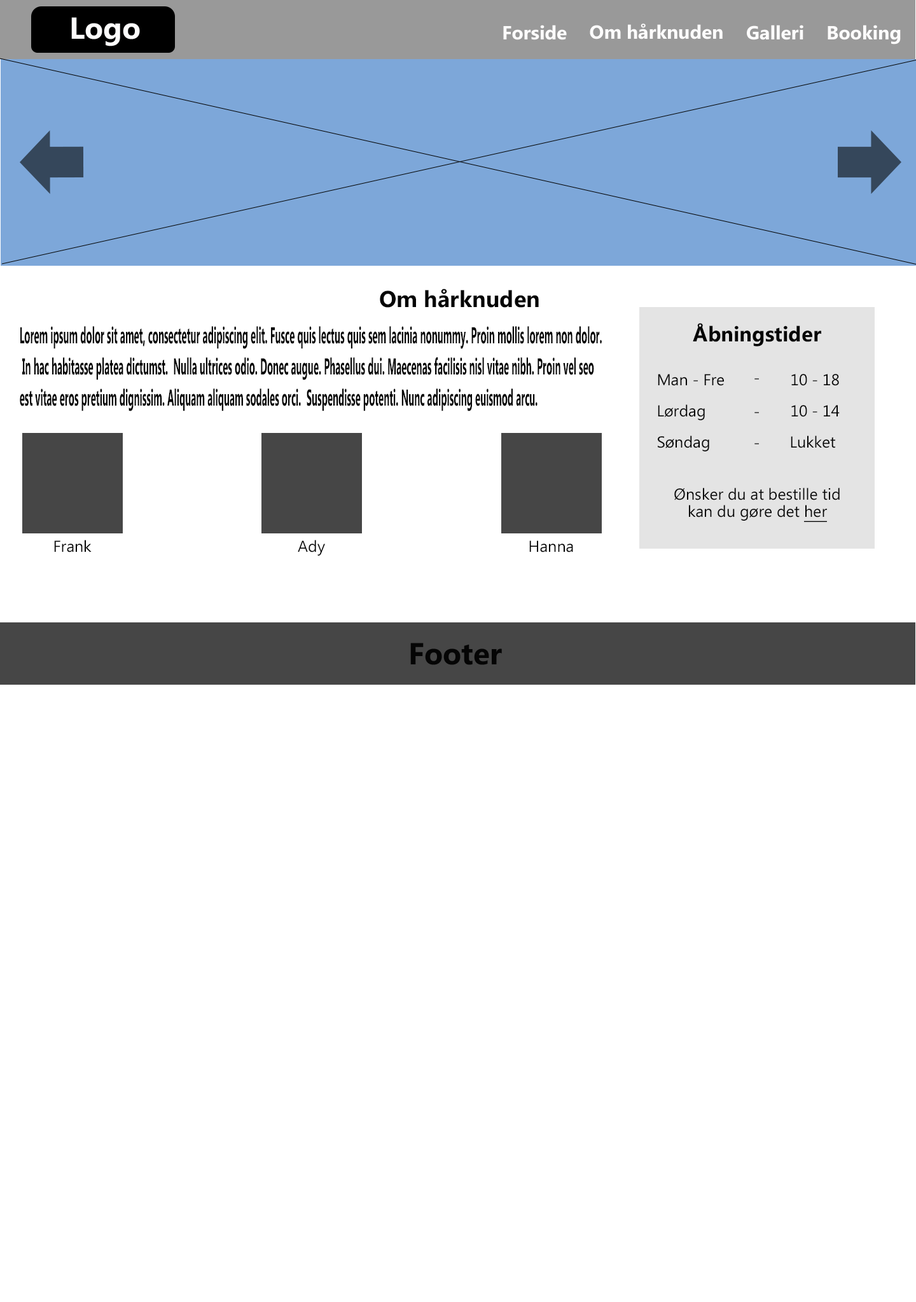
<style>
.page{position:relative;width:916px;height:1302px;background:#ffffff}
.page>*{position:absolute;margin:0}
.t1{font:30.5px "Ebrima-Bold";color:#fdfcfc}
.t2{font:19.1px "Ebrima-Bold";color:#fdfcfc}
.t3{font:22.9px "Ebrima-Bold";color:#050505}
.t4{font:22.9px/31.2px "Ebrima-Bold";color:#050505;scale:0.41 1}
.t5{font:21px "Ebrima-Bold";color:#050505}
.t6{font:15.9px "Ebrima";color:#050505}
.t7{font:15.9px "Ebrima"}
.t8{font:15.9px/17.2px "Ebrima";color:#050505}
.t9{font:15.9px/17.2px "Ebrima";color:#050505;text-decoration:underline}
.t10{font:30.5px "Ebrima-Bold";color:#050505}
</style>
<div class="page">
<p class="t1" style="left:71px;top:17px;width:69px;height:29px">Logo</p>
<p class="t2" style="left:503px;top:25px;width:64px;height:15px">Forside</p>
<p class="t2" style="left:589px;top:24px;width:133px;height:15px">Om hårknuden</p>
<p class="t2" style="left:747px;top:25px;width:56px;height:15px">Galleri</p>
<p class="t2" style="left:827px;top:25px;width:73px;height:20px">Booking</p>
<p class="t3" style="left:380px;top:289px;width:159px;height:19px">Om hårknuden</p>
<p class="t4" style="left:20px;top:326px;width:582px;height:85px">Lorem ipsum dolor sit amet, consectetur adipiscing elit. Fusce quis lectus quis sem lacinia nonummy. Proin mollis lorem non dolor.<br> In hac habitasse platea dictumst.  Nulla ultrices odio. Donec augue. Phasellus dui. Maecenas facilisis nisl vitae nibh. Proin vel seo <br>est vitae eros pretium dignissim. Aliquam aliquam sodales orci.  Suspendisse potenti. Nunc adipiscing euismod arcu.</p>
<p class="t5" style="left:692px;top:323px;width:129px;height:24px">Åbningstider</p>
<p class="t6" style="left:657px;top:374px;width:67px;height:12px">Man - Fre</p>
<p class="t6" style="left:791px;top:374px;width:48px;height:12px">10 - 18</p>
<p class="t7" style="left:754px;top:378px;width:5px;height:2px">-</p>
<p class="t6" style="left:657px;top:404px;width:48px;height:16px">Lørdag</p>
<p class="t7" style="left:754px;top:412px;width:5px;height:1px">-</p>
<p class="t6" style="left:791px;top:405px;width:48px;height:12px">10 - 14</p>
<p class="t6" style="left:657px;top:436px;width:52px;height:15px">Søndag</p>
<p class="t6" style="left:790px;top:436px;width:45px;height:12px">Lukket</p>
<p class="t7" style="left:754px;top:443px;width:5px;height:1px">-</p>
<p class="t8" style="left:674px;top:488px;width:165px;height:34px;text-align:center">Ønsker du at bestille tid<br>kan du gøre det <span class="t9">her</span></p>
<p class="t6" style="left:54px;top:540px;width:38px;height:13px">Frank</p>
<p class="t6" style="left:298px;top:540px;width:27px;height:16px">Ady</p>
<p class="t6" style="left:529px;top:540px;width:44px;height:13px">Hanna</p>
<p class="t10" style="left:410px;top:643px;width:92px;height:22px">Footer</p>
</div>
